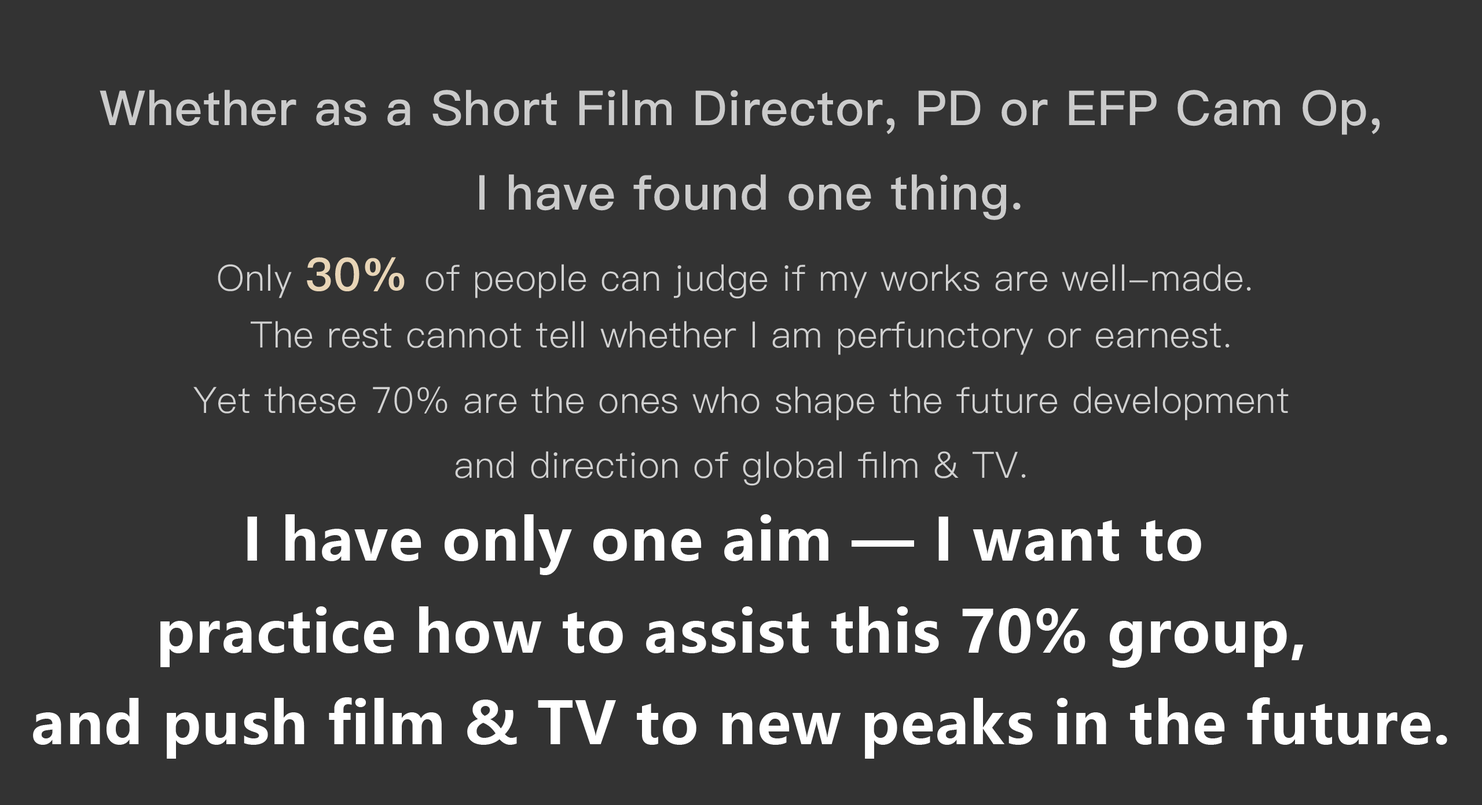
<style>
.page{position:relative;width:1482px;height:805px;background:#333333}
.page>*{position:absolute;margin:0}
.t1{font:48.2px "PingFang-SC-Bold";letter-spacing:0.02em;color:#cbcbcb}
.t2{font:36.2px/65.1px "PingFang-SC-Regular";letter-spacing:0.02em;color:#d1d1d1}
.t3{font:36.2px/65.1px "PingFang-SC-Bold";letter-spacing:0.02em;color:#cbcbcb}
.t4{font:45.8px/65.1px "PingFang-SC-Heavy";letter-spacing:0.02em;color:#e8d5b7}
.t5{font:57.9px/91.7px "MicrosoftYaHei-Bold";letter-spacing:0.02em;color:#ffffff}
</style>
<div class="page">
<p class="t1" style="left:100px;top:90px;width:1280px;height:130px;text-align:center">Whether as a Short Film Director, PD or EFP Cam Op,<br> I have found one thing.</p>
<p class="t2" style="left:193px;top:257px;width:1096px;height:229px;text-align:center"><span class="t3"><br></span>Only <span class="t4">30% </span>of people can judge if my works are well-made. <br>The rest cannot tell whether I am perfunctory or earnest.<br>Yet these 70% are the ones who shape the future development<br>and direction of global film &amp; TV.</p>
<p class="t5" style="left:33px;top:514px;width:1414px;height:244px;text-align:center">I have only one aim — I want to <br>practice how to assist this 70% group,<br> and push film &amp; TV to new peaks in the future.</p>
</div>
